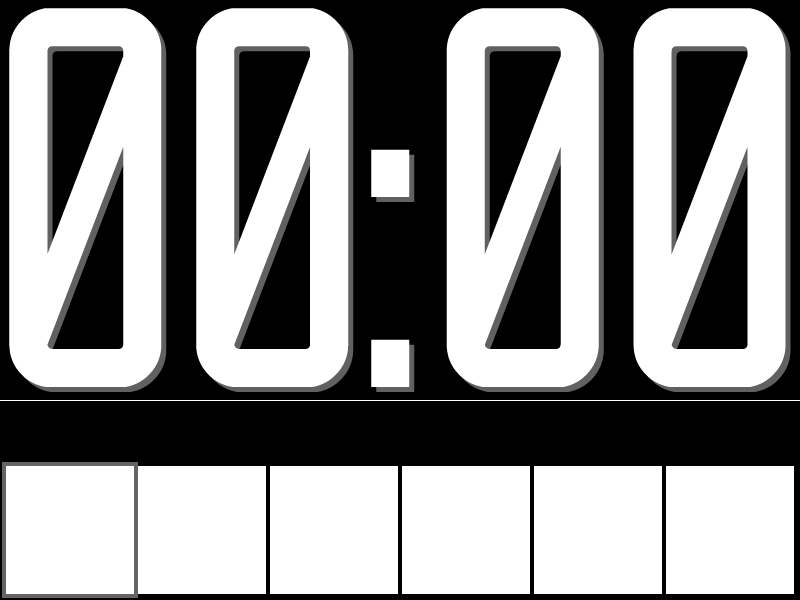
<style>
.page{position:relative;width:800px;height:600px;background:#ffffff}
.page>*{position:absolute;margin:0}
.t1{font:540px "Reckoner";color:#ffffff}
</style>
<div class="page">
<p class="t1" style="left:9px;top:8px;width:777px;height:379px">00:00</p>
<p class="t1" style="left:14px;top:13px;width:777px;height:379px">00:00</p>
</div>
